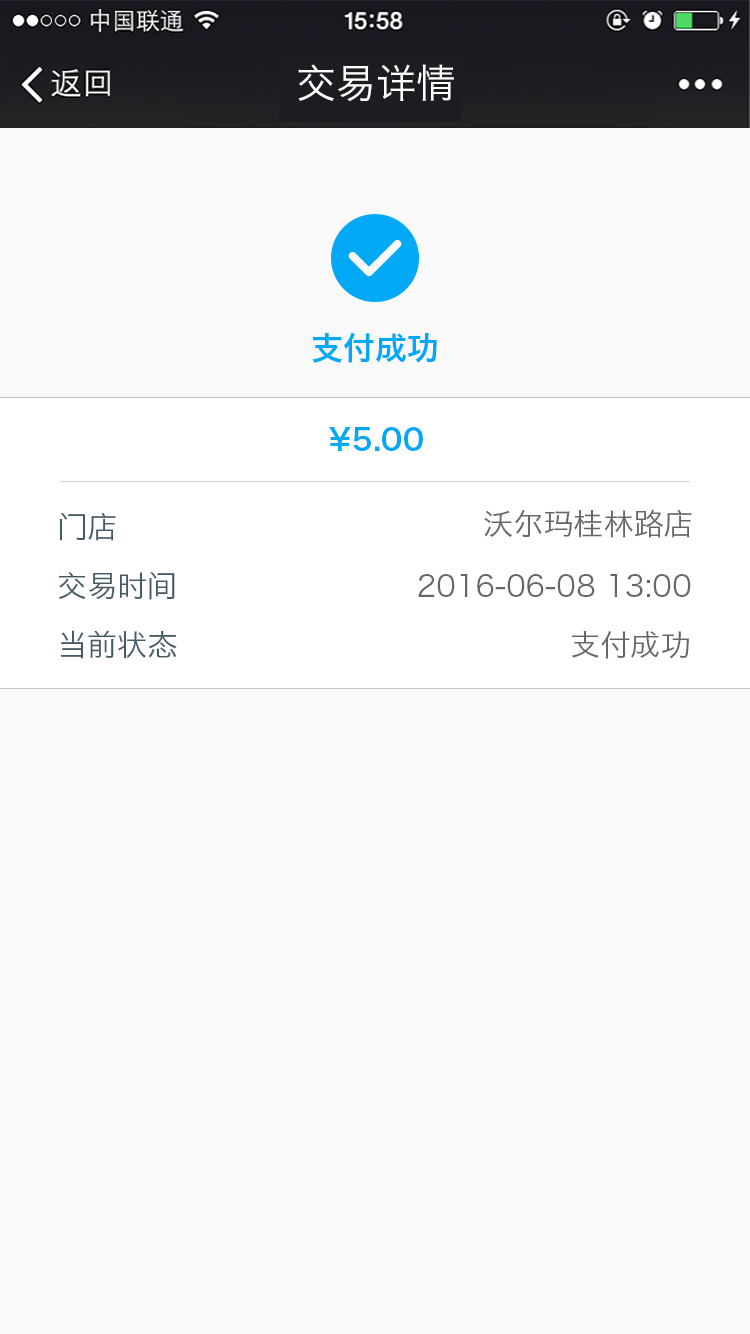
<style>
.page{position:relative;width:750px;height:1334px;background:#f9f9f9}
.page>*{position:absolute;margin:0}
.t1{font:40px "HiraginoSansGB-W3";color:#ffffff}
.t2{font:32px "HiraginoSansGB-W6";color:#03a9f4}
.t3{font:30px "HiraginoSansGB-W6";color:#03a9f4}
.t4{font:30px "HiraginoSansGB-W3";color:#666666}
.t5{font:30px "HiraginoSansGB-W3";color:#455a64}
</style>
<div class="page">
<p class="t1" style="left:298px;top:64px;width:156px;height:38px">交易详情</p>
<p class="t2" style="left:312px;top:332px;width:125px;height:31px">支付成功</p>
<p class="t3" style="left:329px;top:427px;width:94px;height:24px">¥5.00</p>
<p class="t4" style="left:484px;top:509px;width:208px;height:29px">沃尔玛桂林路店</p>
<p class="t5" style="left:59px;top:512px;width:57px;height:29px">门店</p>
<p class="t5" style="left:59px;top:571px;width:116px;height:29px">交易时间</p>
<p class="t4" style="left:418px;top:574px;width:273px;height:24px">2016-06-08 13:00</p>
<p class="t5" style="left:61px;top:630px;width:116px;height:29px">当前状态</p>
<p class="t4" style="left:572px;top:631px;width:117px;height:28px">支付成功</p>
</div>
